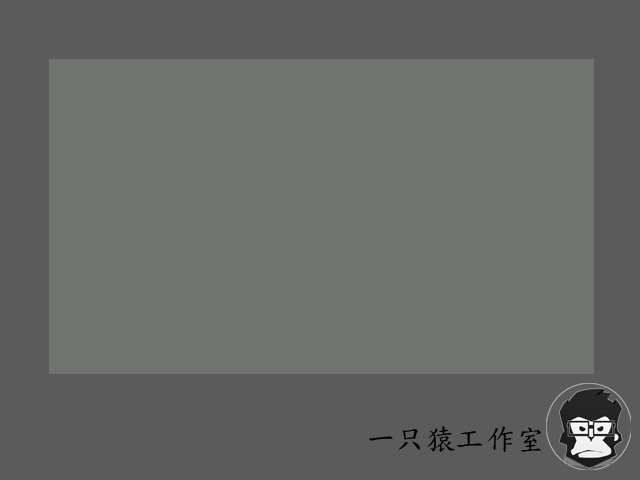
<style>
.page{position:relative;width:640px;height:480px;background:#6f746f}
.page>*{position:absolute;margin:0}
.t1{font:30px "DFKaiShu-SB-Estd-BF";color:#000000}
</style>
<div class="page">
<p class="t1" style="left:369px;top:426px;width:172px;height:26px">一只猿工作室</p>
</div>
